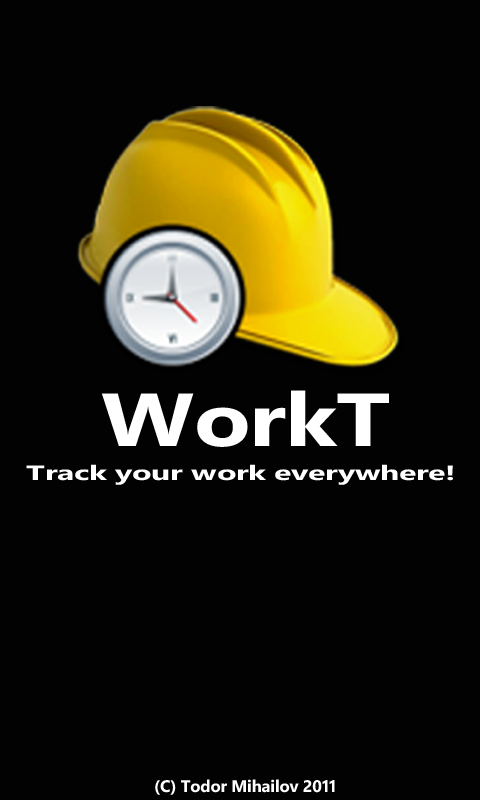
<style>
.page{position:relative;width:480px;height:800px;background:#020202}
.page>*{position:absolute;margin:0}
.t1{font:75px "SegoeWP-Bold";letter-spacing:-0.01em;color:#ffffff;scale:1.24 1}
.t2{font:20.8px "SegoeWP-Bold";letter-spacing:-0.01em;color:#ffffff;scale:1.54 1}
.t3{font:16.7px "SegoeWP-Bold";letter-spacing:-0.01em;color:#fefffe}
</style>
<div class="page">
<p class="t1" style="left:101px;top:390px;width:288px;height:57px">WorkT</p>
<p class="t2" style="left:26px;top:464px;width:427px;height:21px">Track your work everywhere!</p>
<p class="t3" style="left:155px;top:779px;width:180px;height:16px">(C) Todor Mihailov 2011</p>
</div>
